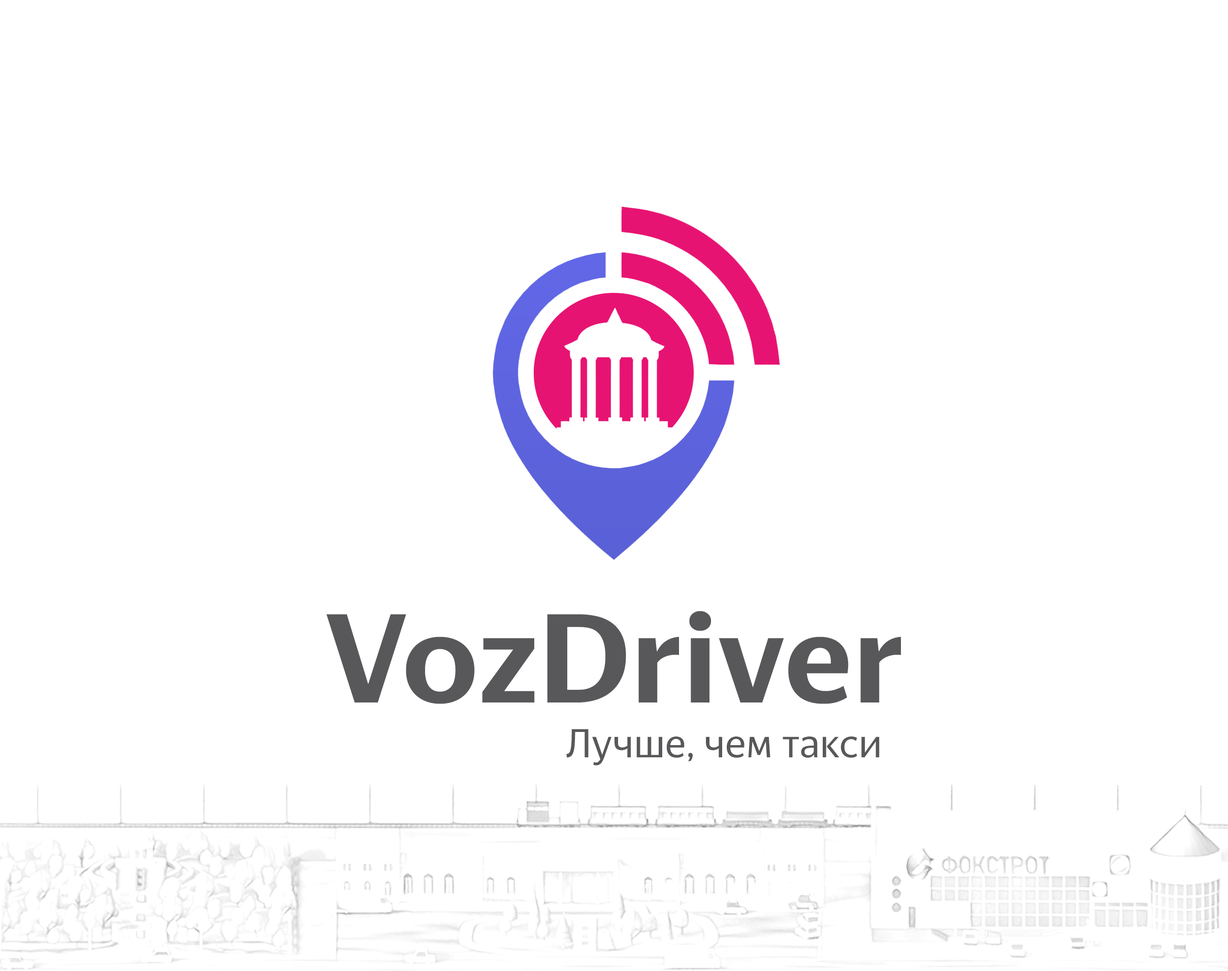
<style>
.page{position:relative;width:1228px;height:971px;background:#ffffff}
.page>*{position:absolute;margin:0}
.t1{font:126.9px "YandexSansDisplay-Bold";color:#58585a}
.t2{font:40.6px "YandexSansDisplay-Regular";color:#58585a}
</style>
<div class="page">
<p class="t1" style="left:326px;top:611px;width:575px;height:93px">VozDriver</p>
<p class="t2" style="left:566px;top:729px;width:313px;height:37px">Лучше, чем такси</p>
</div>
